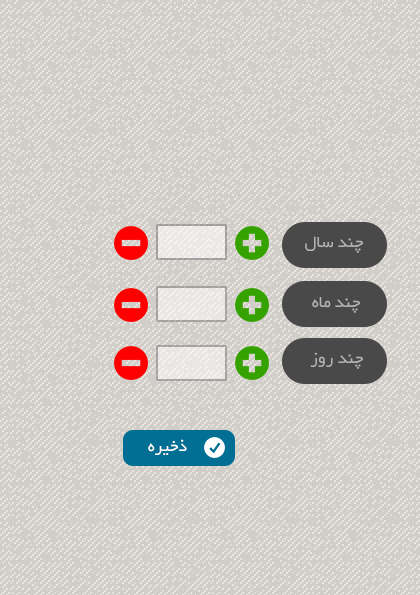
<style>
.page{position:relative;width:420px;height:595px;background:#d1ceca}
.page>*{position:absolute;margin:0}
.t1{font:18px "BYekan";color:#b3b3b3}
.t2{font:18px "BYekan";color:#ffffff}
</style>
<div class="page">
<p class="t1" style="left:305px;top:236px;width:58px;height:17px">چند سال</p>
<p class="t1" style="left:312px;top:297px;width:48px;height:16px">چند ماه</p>
<p class="t1" style="left:310px;top:352px;width:53px;height:17px">چند روز</p>
<p class="t2" style="left:148px;top:439px;width:39px;height:16px">ذخیره</p>
</div>
